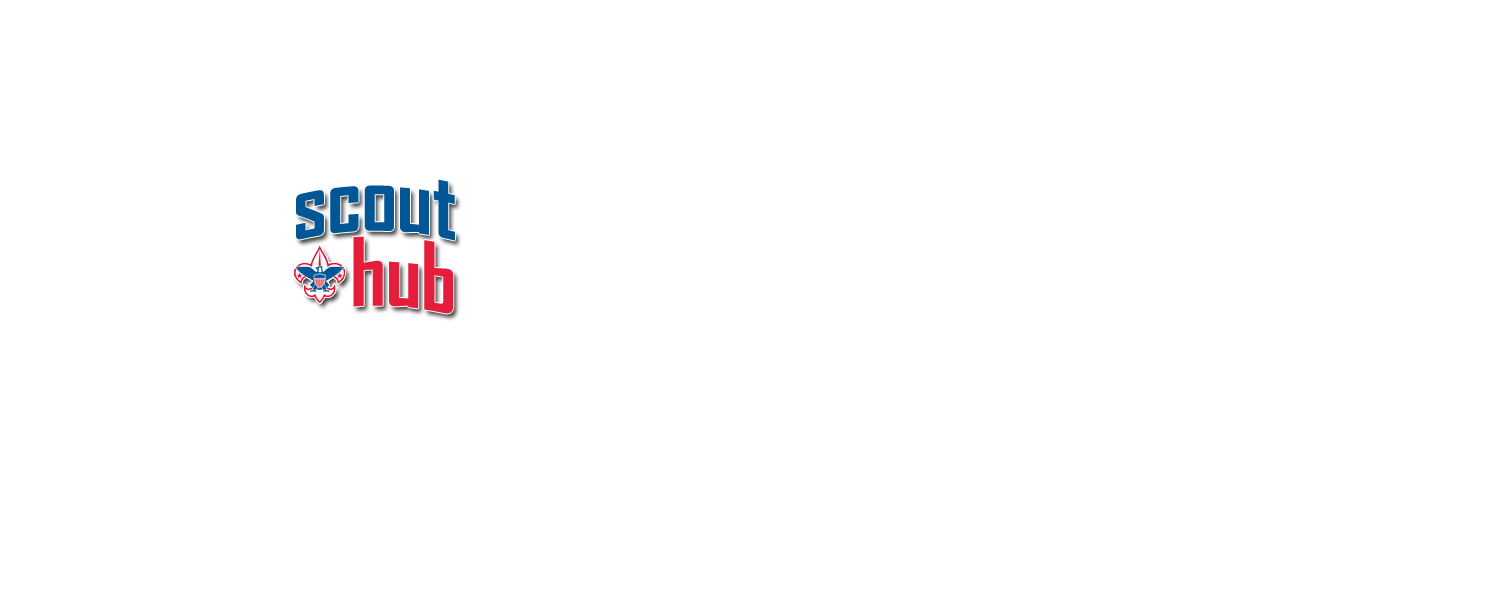
<style>
.page{position:relative;width:1500px;height:600px;background:#ffffff}
.page>*{position:absolute;margin:0}
.t1{font:90px/75px "AgencyFB-Bold";color:#015696}
.t2{font:90px/75px "AgencyFB-Bold";color:#e51d3b}
</style>
<div class="page">
<p class="t1" style="left:296px;top:179px;width:159px;height:135px;text-align:right">scout<br><span class="t2">hub</span></p>
</div>
